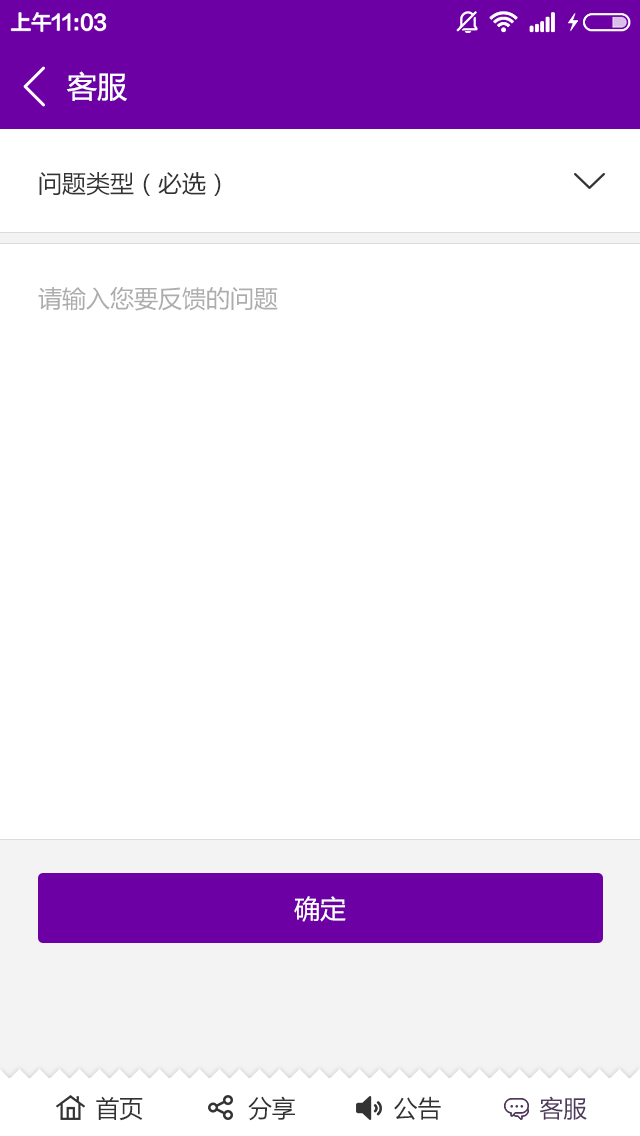
<style>
.page{position:relative;width:640px;height:1136px;background:#ffffff}
.page>*{position:absolute;margin:0}
.t1{font:30px "MicrosoftYaHei";color:#ffffff}
.t2{font:24px "MicrosoftYaHei";color:#333333}
.t3{font:24px "MicrosoftYaHei";color:#adadad}
.t4{font:26px "MicrosoftYaHei";color:#ffffff}
.t5{font:24px "MicrosoftYaHei";color:#4f385c}
</style>
<div class="page">
<p class="t1" style="left:67px;top:71px;width:60px;height:30px">客服</p>
<p class="t2" style="left:39px;top:172px;width:182px;height:24px">问题类型（必选）</p>
<p class="t3" style="left:38px;top:286px;width:240px;height:25px">请输入您要反馈的问题</p>
<p class="t4" style="left:294px;top:896px;width:52px;height:26px">确定</p>
<p class="t2" style="left:96px;top:1096px;width:491px;height:25px">首页               分享              公告              <span class="t5">客服</span></p>
</div>
